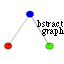
<style>
.page{position:relative;width:64px;height:64px;background:#ffffff}
.page>*{position:absolute;margin:0}
.t1{font:10px "Times-Roman";color:#000000}
</style>
<div class="page">
<p class="t1" style="left:37px;top:20px;width:26px;height:7px">bstract</p>
<p class="t1" style="left:42px;top:27px;width:22px;height:9px">graph</p>
</div>
